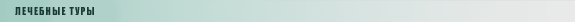
<style>
.page{position:relative;width:575px;height:22px}
.page>*{position:absolute;margin:0}
.t1{font:10px "Impact";letter-spacing:0.1em;color:#183b31}
</style>
<div class="page">
<p class="t1" style="left:15px;top:7px;width:79px;height:8px">ЛЕЧЕБНЫЕ ТУРЫ</p>
</div>
